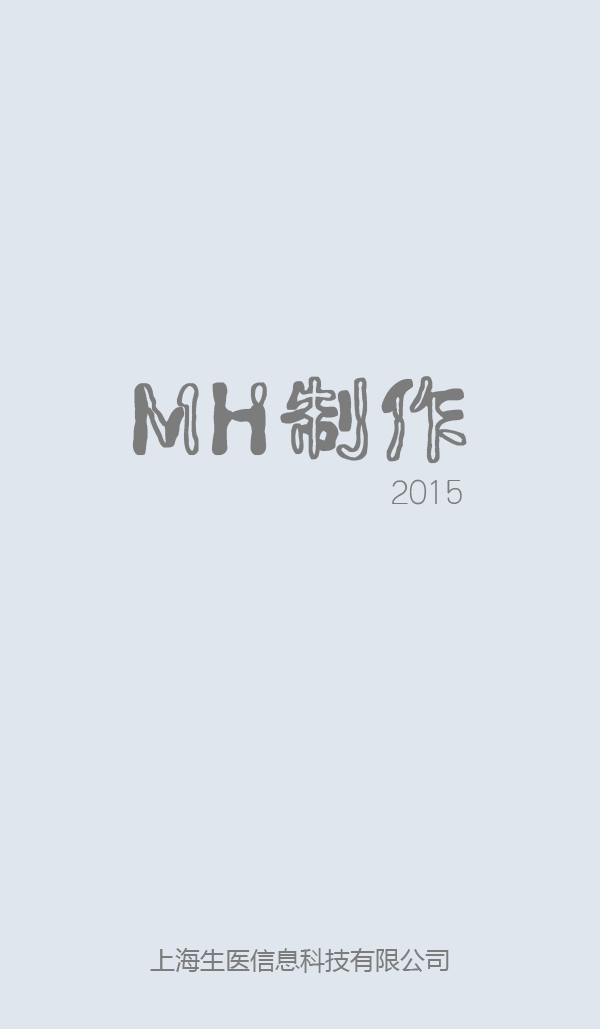
<style>
.page{position:relative;width:600px;height:1029px;background:#dfe6ee}
.page>*{position:absolute;margin:0}
.t1{font:97.3px "JiangouEG-Bold-GB";color:#7c7c7c;font-weight:bold}
.t2{font:36px "JJiaSu";color:#7c7c7c}
.t3{font:25px "MicrosoftYaHei";color:#7c7c7c}
</style>
<div class="page">
<p class="t1" style="left:132px;top:376px;width:335px;height:88px">MH制作</p>
<p class="t2" style="left:392px;top:479px;width:70px;height:26px">2015</p>
<p class="t3" style="left:150px;top:948px;width:299px;height:25px">上海生医信息科技有限公司</p>
</div>
